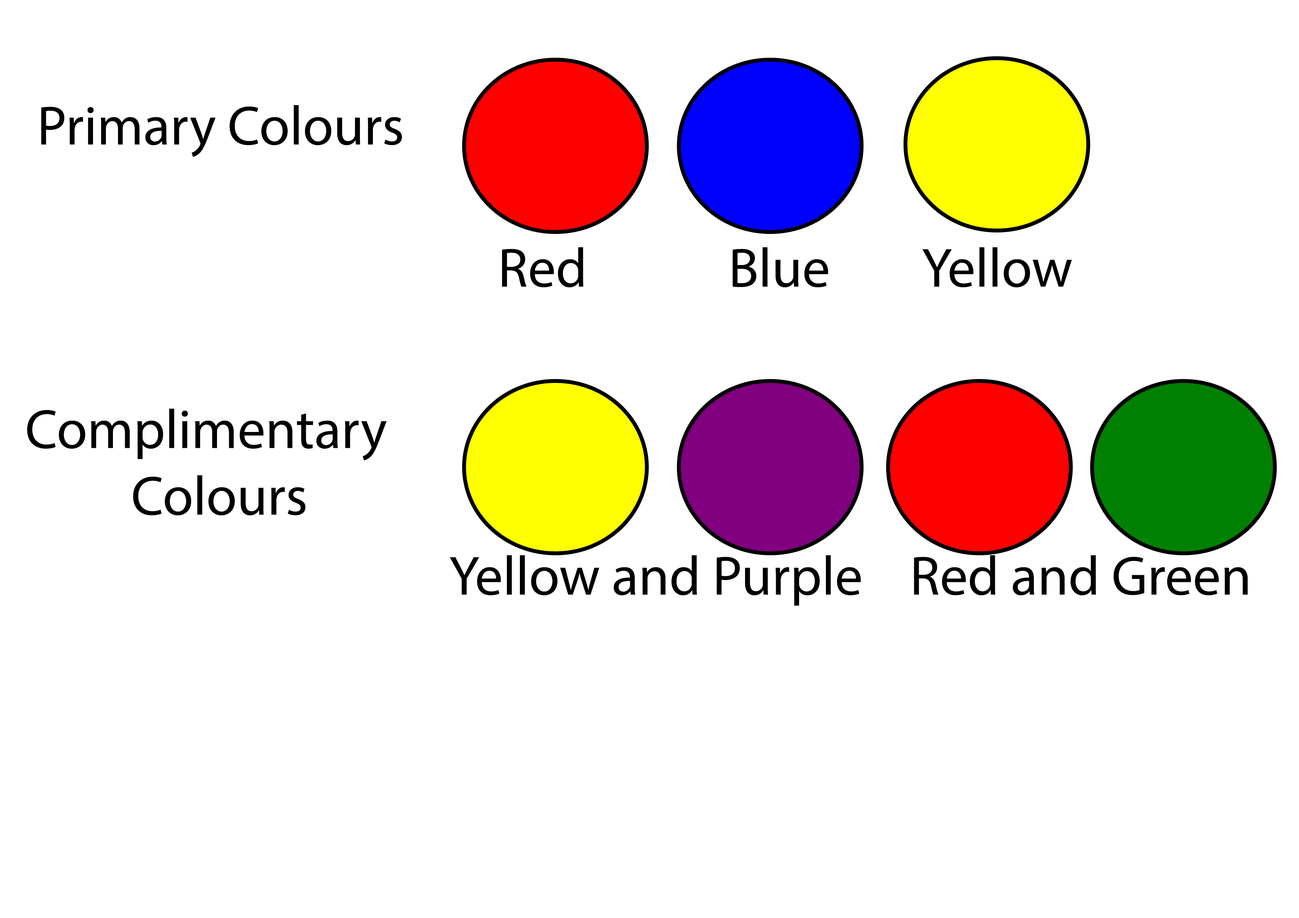
<style>
.page{position:relative;width:1299px;height:918px;background:#ffffff}
.page>*{position:absolute;margin:0}
.t1{font:55.5px "MyriadPro-Regular";color:#000000}
</style>
<div class="page">
<p class="t1" style="left:41px;top:105px;width:361px;height:52px">Primary Colours</p>
<p class="t1" style="left:502px;top:247px;width:570px;height:41px">Red            Blue        Yellow</p>
<p class="t1" style="left:27px;top:409px;width:360px;height:107px">Complimentary<br>         Colours</p>
<p class="t1" style="left:449px;top:555px;width:799px;height:51px">Yellow and Purple    Red and Green</p>
</div>
